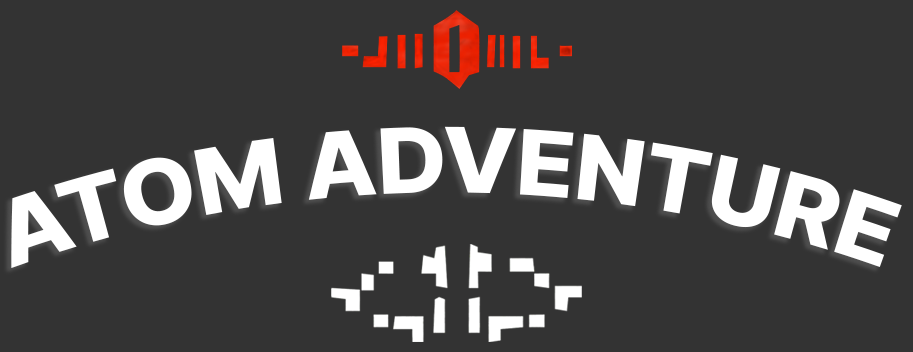
<style>
.page{position:relative;width:913px;height:352px;background:#333333}
.page>*{position:absolute;margin:0}
.t1{font:90px "Inter-ExtraBold";color:#ffffff}
</style>
<div class="page">
<p class="t1" style="left:11px;top:126px;width:891px;height:142px">ATOM ADVENTURE</p>
</div>
